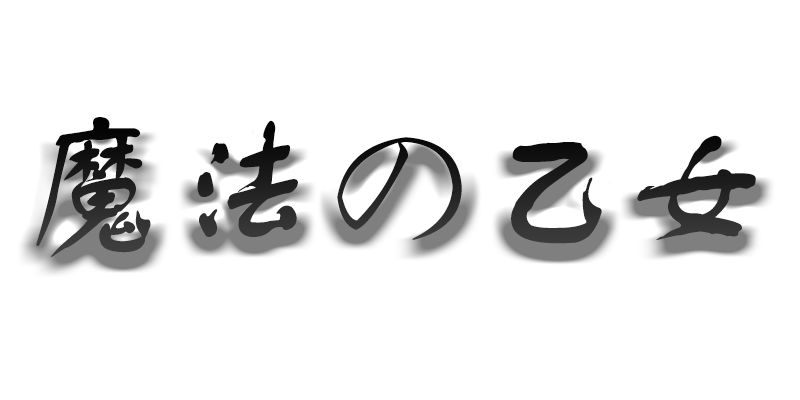
<style>
.page{position:relative;width:800px;height:400px;background:#ffffff}
.page>*{position:absolute;margin:0}
.t1{font:143.1px "FZNSTJW--GB1-0";letter-spacing:0.05em;color:#212121}
</style>
<div class="page">
<p class="t1" style="left:36px;top:117px;width:720px;height:140px">魔法の乙女</p>
</div>
